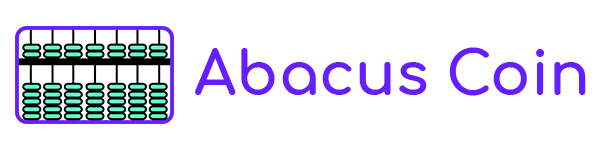
<style>
.page{position:relative;width:600px;height:150px;background:#ffffff}
.page>*{position:absolute;margin:0}
.t1{font:60px "Comfortaa-Bold";color:#651fff}
</style>
<div class="page">
<p class="t1" style="left:195px;top:47px;width:391px;height:49px">Abacus Coin</p>
</div>
